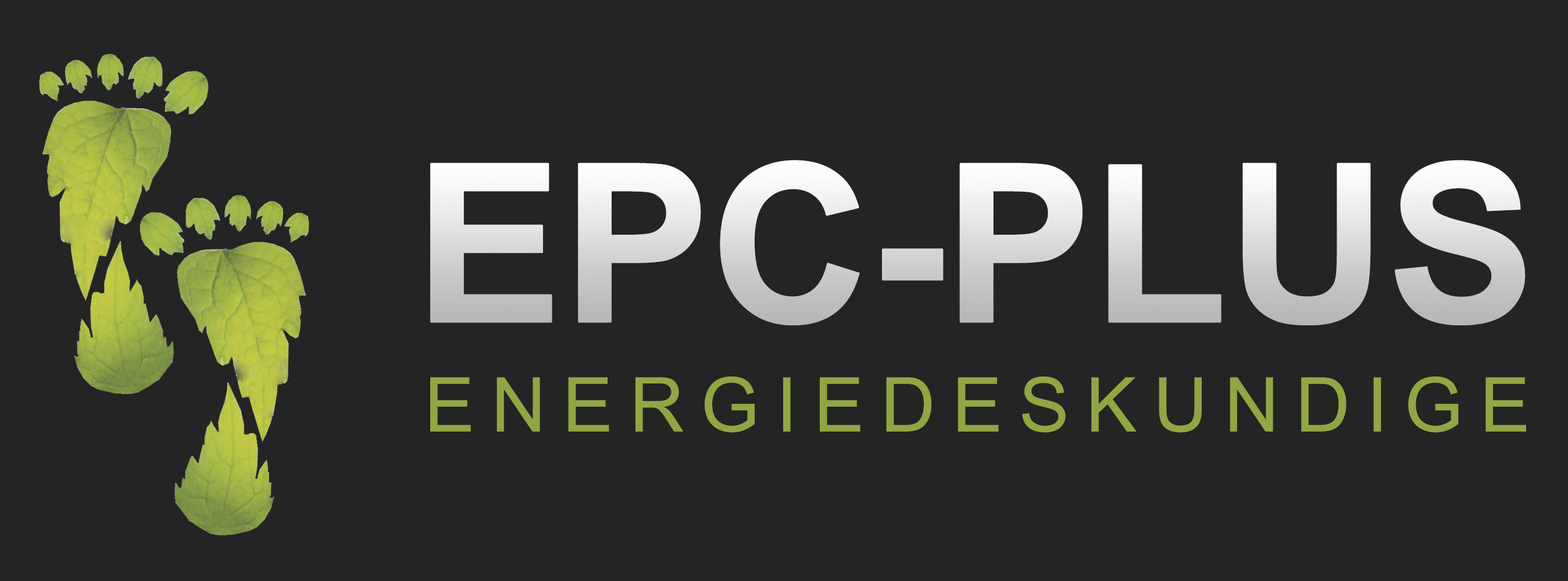
<style>
.page{position:relative;width:1568px;height:581px;background:#242424}
.page>*{position:absolute;margin:0}
.t1{font:220.9px "Arial-BoldMT";letter-spacing:-0.025em;font-weight:bold}
.t2{font:75.6px "ArialMT";letter-spacing:0.22em;color:#91a642}
</style>
<div class="page">
<p class="t1" style="left:430px;top:160px;width:1096px;height:166px">EPC-PLUS</p>
<p class="t2" style="left:430px;top:377px;width:1096px;height:56px">ENERGIEDESKUNDIGE</p>
</div>
